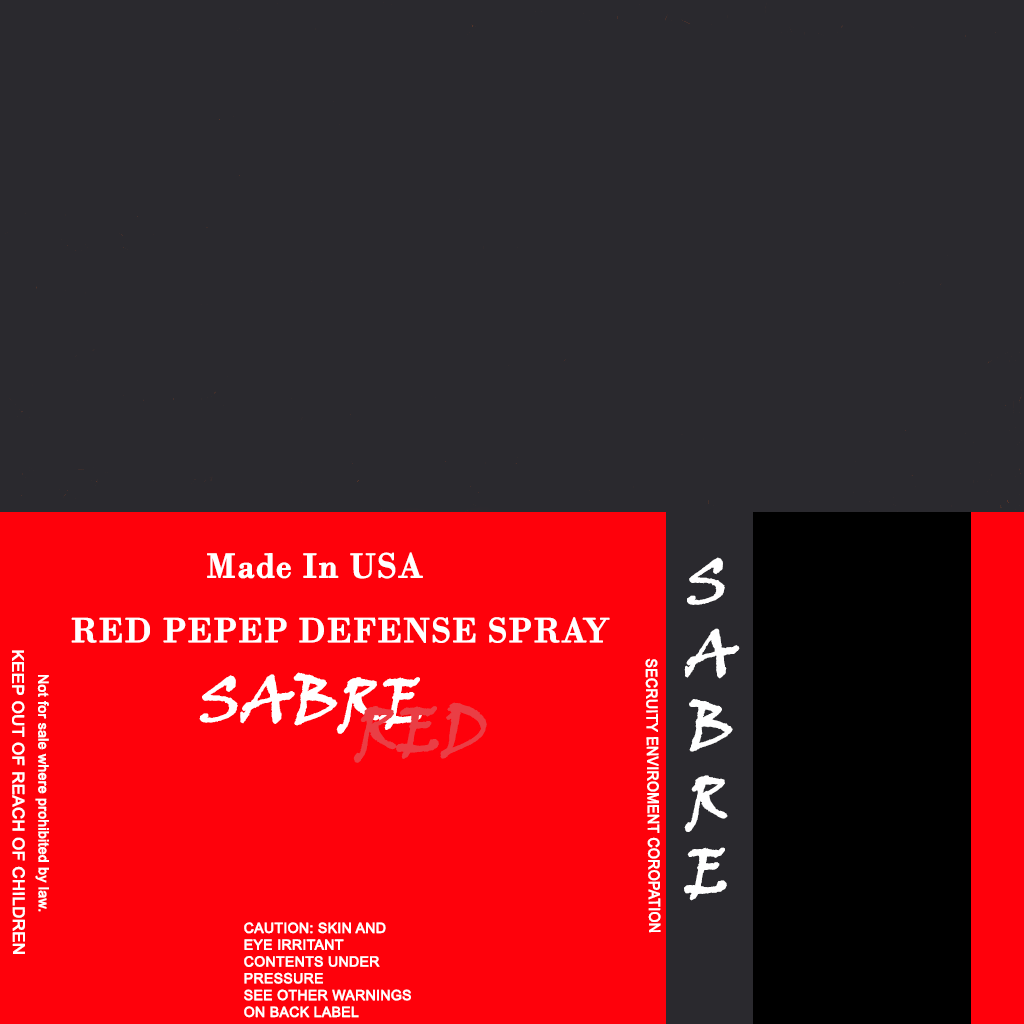
<style>
.page{position:relative;width:1024px;height:1024px;background:#2a292e}
.page>*{position:absolute;margin:0}
.t1{font:36px "BodoniMT";color:#ffffff;font-weight:bold}
.t2{font:60px "VinerHandITC";color:#ffffff;font-weight:bold}
.t3{font:16px "ArialMT";color:#ffffff;font-weight:bold;scale:1.04 1}
.t4{font:15.2px "ArialMT";color:#ffffff;font-weight:bold;scale:0.92 1}
.t5{font:14px "ArialMT";color:#ffffff;font-weight:bold}
.t6{font:60px "VinerHandITC";color:#ea3e45;font-weight:bold}
</style>
<div class="page">
<p class="t1" style="left:207px;top:552px;width:216px;height:27px">Made In USA</p>
<p class="t2" style="left:684px;top:557px;width:56px;height:344px">SABR<br>E</p>
<p class="t1" style="left:71px;top:617px;width:539px;height:26px">RED PEPEP DEFENSE SPRAY</p>
<p class="t3" style="left:11px;top:650px;width:14px;height:304px;rotate:90deg">KEEP OUT OF REACH OF CHILDREN</p>
<p class="t4" style="left:645px;top:658px;width:16px;height:275px;rotate:89deg">SECRUITY ENVIROMENT COROPATION</p>
<p class="t5" style="left:35px;top:675px;width:14px;height:237px;rotate:90deg">Not for sale where prohibited by law.</p>
<p class="t2" style="left:199px;top:672px;width:223px;height:62px">SABRE</p>
<p class="t6" style="left:353px;top:702px;width:134px;height:61px">RED</p>
<p class="t5" style="left:244px;top:922px;width:167px;height:96px">CAUTION: SKIN AND<br>EYE IRRITANT<br>CONTENTS UNDER<br>PRESSURE<br>SEE OTHER WARNINGS<br>ON BACK LABEL</p>
</div>
